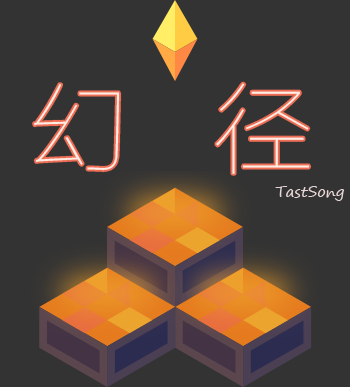
<style>
.page{position:relative;width:350px;height:387px;background:#333333}
.page>*{position:absolute;margin:0}
.t1{font:100px "FZLTCXHJW--GB1-0";color:#ffece3}
.t2{font:15px "SegoePrint";color:#e6d5d4}
</style>
<div class="page">
<p class="t1" style="left:34px;top:83px;width:276px;height:91px">幻   径</p>
<p class="t2" style="left:275px;top:186px;width:70px;height:15px">TastSong</p>
</div>
